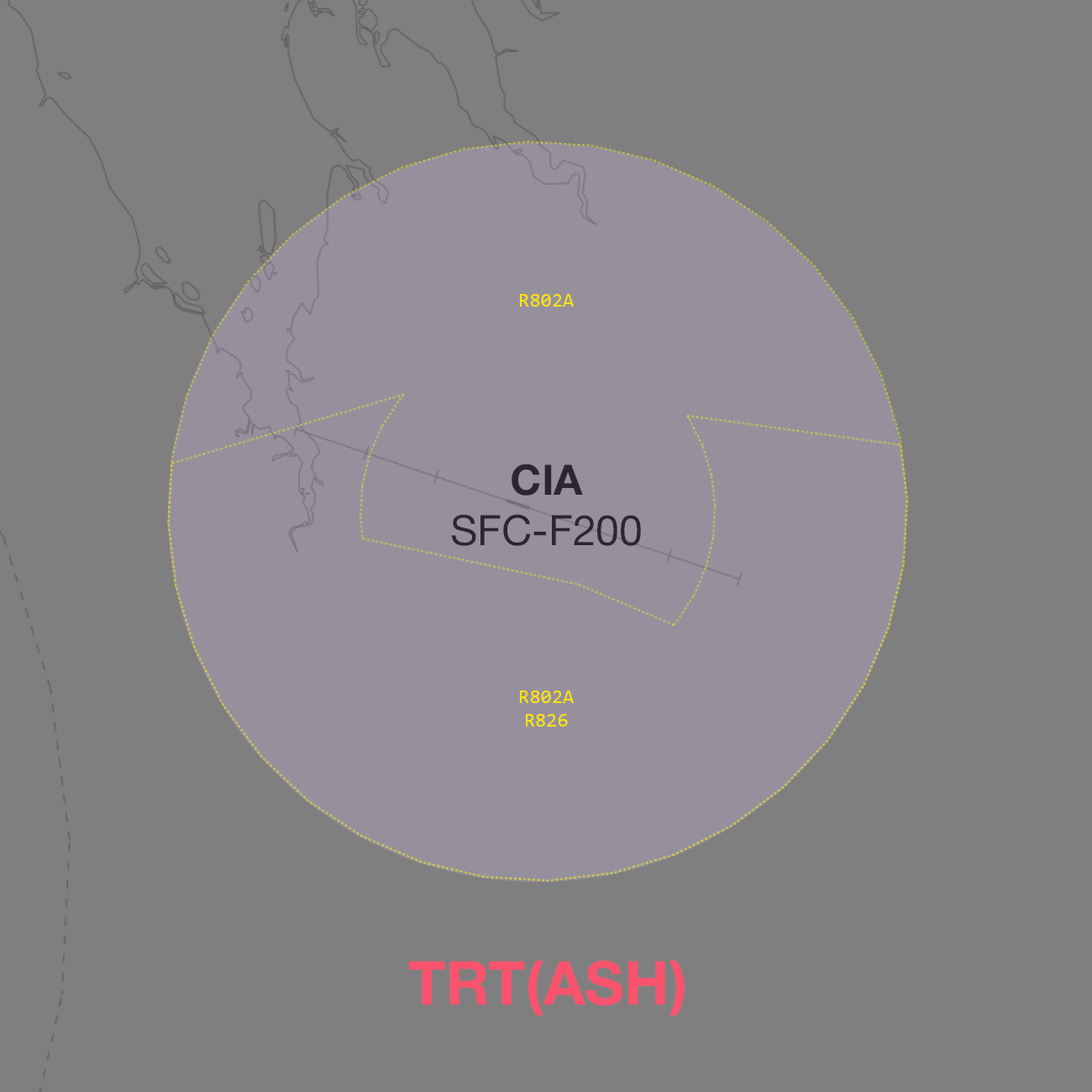
<style>
.page{position:relative;width:1092px;height:1092px;background:#7f7f7f}
.page>*{position:absolute;margin:0}
.t1{font:20.2px "Consolas";color:#ffe400}
.t2{font:42.1px "HelveticaNeue-Roman";color:#2c2533}
.t3{font:42.1px "HelveticaNeue-Bold";color:#2c2533}
.t4{font:60.7px "HelveticaNeue-Bold";color:#f9536e}
</style>
<div class="page">
<p class="t1" style="left:519px;top:294px;width:55px;height:13px">R802A</p>
<p class="t2" style="left:452px;top:464px;width:189px;height:82px;text-align:center"><span class="t3">CIA<br></span>SFC-F200</p>
<p class="t1" style="left:519px;top:690px;width:55px;height:37px;text-align:center">R802A<br>R826</p>
<p class="t4" style="left:409px;top:960px;width:276px;height:56px">TRT(ASH)</p>
</div>
